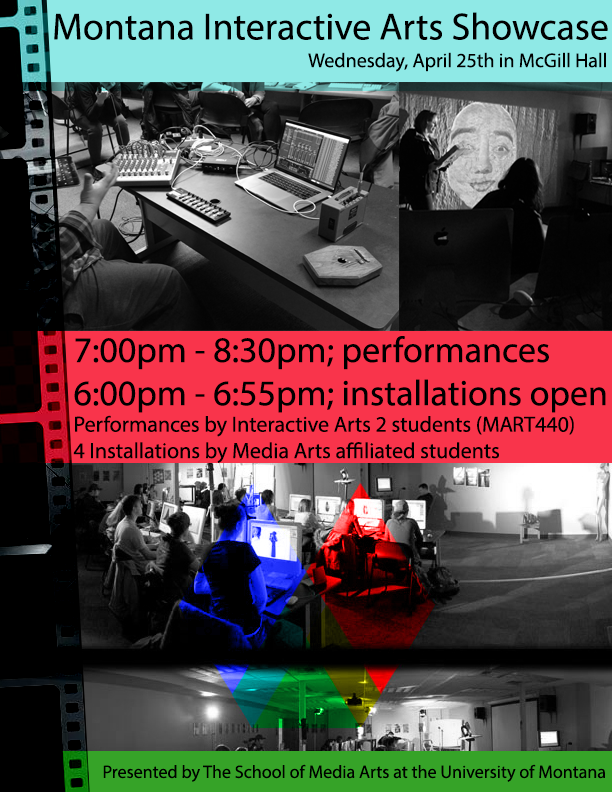
<style>
.page{position:relative;width:612px;height:792px}
.page>*{position:absolute;margin:0}
.t1{font:38px "MyriadPro-Regular";color:#000000}
.t2{font:20px "MyriadPro-Regular";color:#000000}
.t3{font:22px "MyriadPro-Regular";color:#000000}
.t4{font:36px "MyriadPro-Regular";color:#000000}
.t5{font:18px "MyriadPro-Regular";color:#000000}
</style>
<div class="page">
<p class="t1" style="left:54px;top:12px;width:554px;height:28px">Montana Interactive Arts Showcase</p>
<p class="t2" style="left:308px;top:52px;width:298px;height:20px">Wednesday, April 25th in McGill Hall</p>
<p class="t3" style="left:73px;top:336px;width:533px;height:127px"><span class="t4">7:00pm - 8:30pm; performances<br>6:00pm - 6:55pm; installations open<br></span>Performances by Interactive Arts 2 students (MART440)<br>4 Installations by Media Arts affiliated students</p>
<p class="t5" style="left:103px;top:764px;width:502px;height:18px">Presented by The School of Media Arts at the University of Montana</p>
</div>
